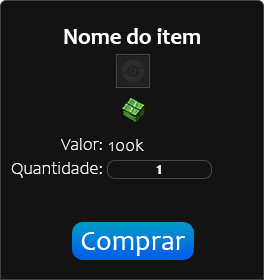
<style>
.page{position:relative;width:264px;height:280px;background:#131313}
.page>*{position:absolute;margin:0}
.t1{font:22.7px "Candara-Bold";color:#ffffff}
.t2{font:17.9px "Candara-Light";color:#ffffff}
.t3{font:18px "Candara-Light";color:#ffffff}
.t4{font:18px "Candara-Bold";color:#ffffff}
.t5{font:28.4px "Candara";color:#ffffff}
</style>
<div class="page">
<p class="t1" style="left:64px;top:28px;width:136px;height:16px">Nome do item</p>
<p class="t2" style="left:61px;top:138px;width:41px;height:12px">Valor:</p>
<p class="t3" style="left:109px;top:139px;width:35px;height:12px">100k</p>
<p class="t2" style="left:11px;top:162px;width:91px;height:16px">Quantidade:</p>
<p class="t4" style="left:156px;top:165px;width:5px;height:9px">1</p>
<p class="t5" style="left:81px;top:232px;width:104px;height:24px">Comprar</p>
</div>
